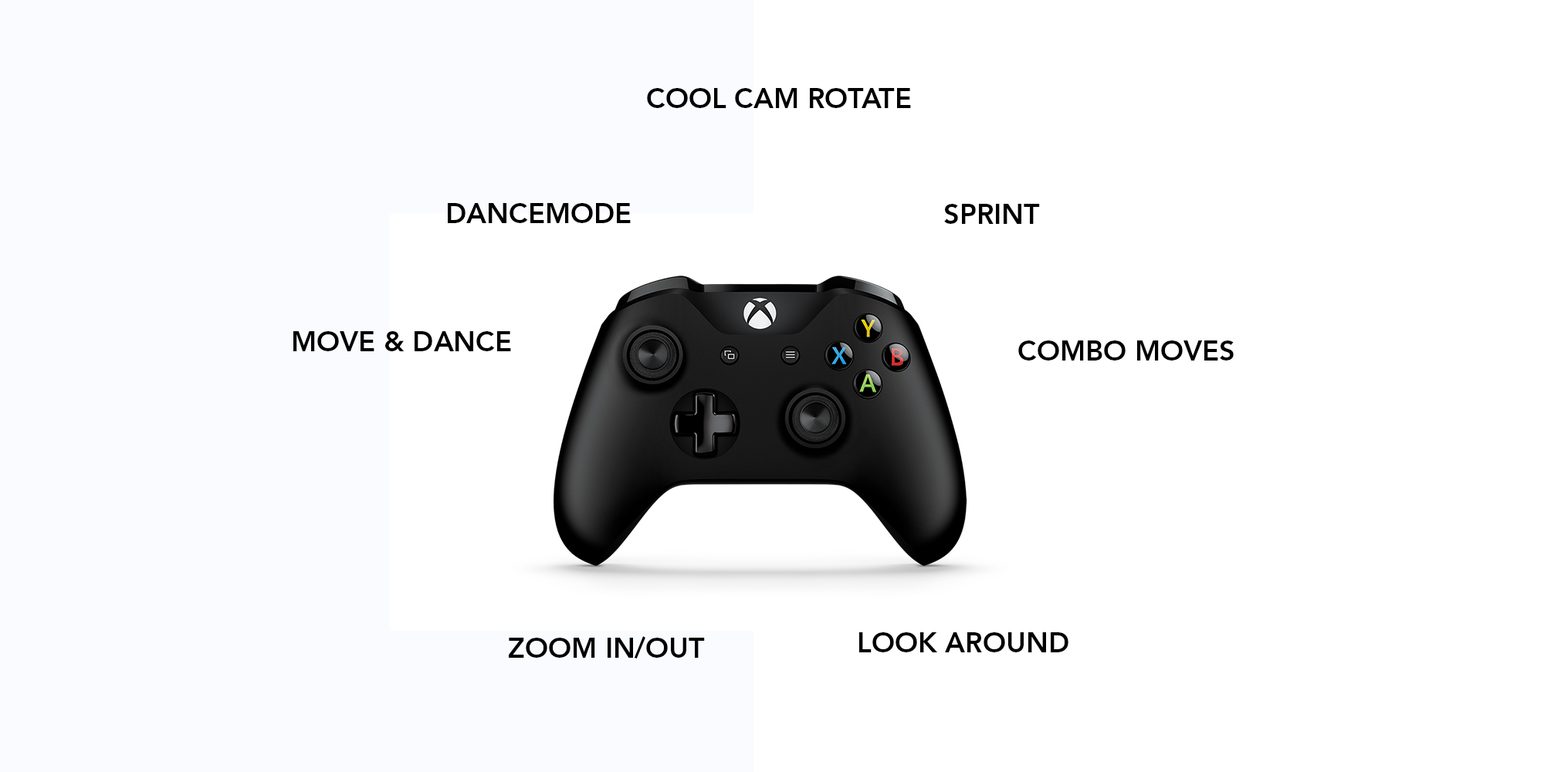
<style>
.page{position:relative;width:1544px;height:772px;background:#ffffff}
.page>*{position:absolute;margin:0}
.t1{font:27.8px "AvenirLTStd-Heavy";color:#000000}
</style>
<div class="page">
<p class="t1" style="left:647px;top:88px;width:264px;height:20px">COOL CAM ROTATE</p>
<p class="t1" style="left:448px;top:203px;width:183px;height:20px">DANCEMODE</p>
<p class="t1" style="left:944px;top:204px;width:96px;height:20px">SPRINT</p>
<p class="t1" style="left:293px;top:331px;width:218px;height:20px">MOVE &amp; DANCE</p>
<p class="t1" style="left:1018px;top:341px;width:216px;height:20px">COMBO MOVES</p>
<p class="t1" style="left:509px;top:636px;width:196px;height:23px">ZOOM IN/OUT</p>
<p class="t1" style="left:859px;top:632px;width:210px;height:20px">LOOK AROUND</p>
</div>
